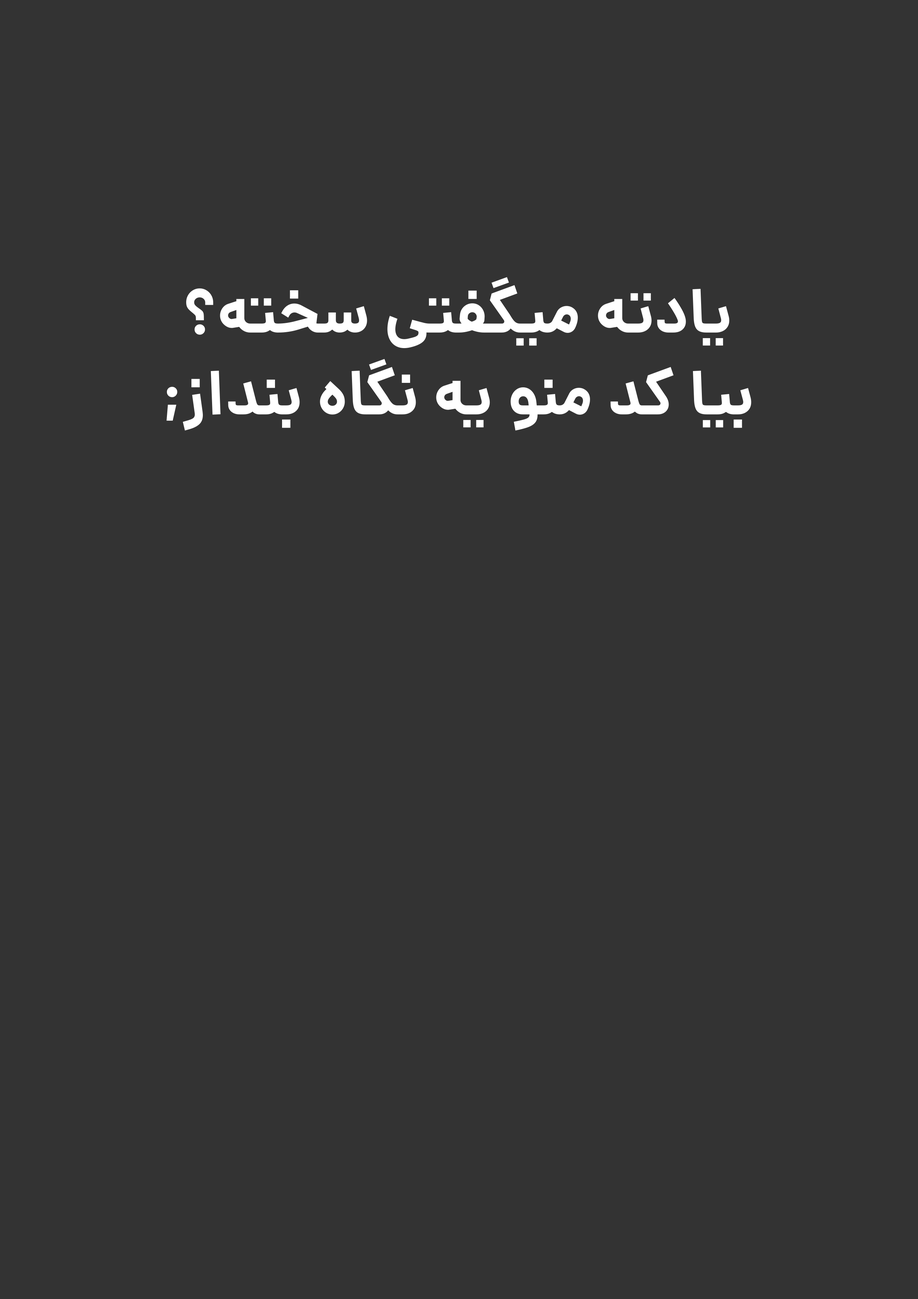
<style>
.page{position:relative;width:918px;height:1299px;background:#333333}
.page>*{position:absolute;margin:0}
.t1{font:63px/81.8px "Dana-Bold";color:#ffffff}
</style>
<div class="page">
<p class="t1" style="left:167px;top:277px;width:585px;height:154px;text-align:center">یادته میگفتی سخته؟<br>بیا کد منو یه نگاه بنداز;</p>
</div>
